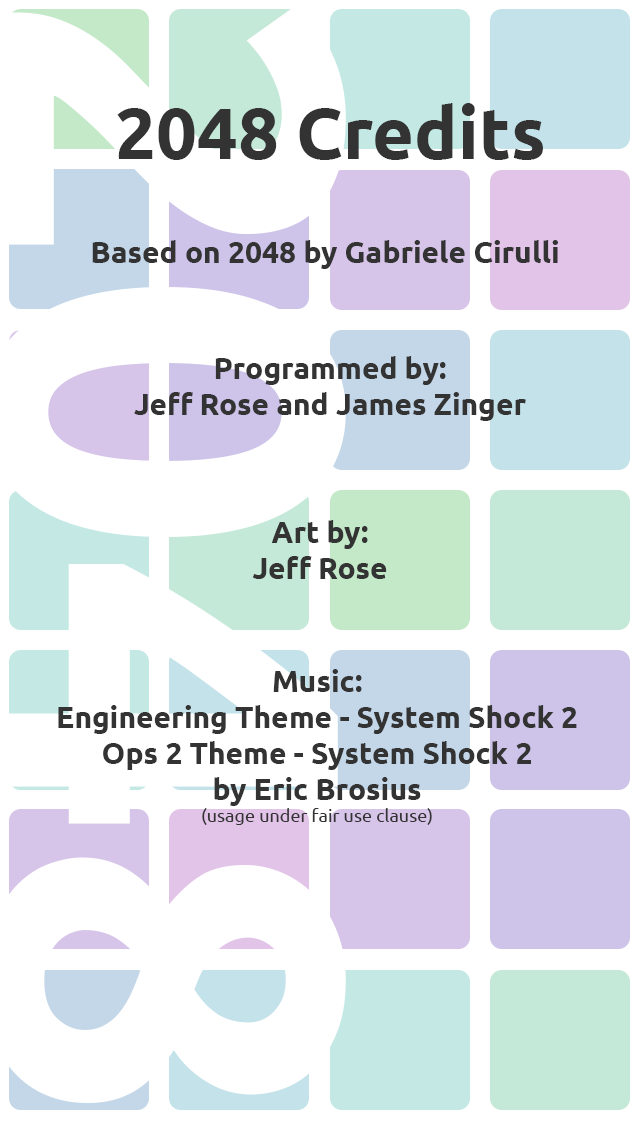
<style>
.page{position:relative;width:640px;height:1136px;background:#ffffff}
.page>*{position:absolute;margin:0}
.t1{font:72px "Ubuntu-Bold";color:#333333}
.t2{font:30px "Ubuntu-Bold";color:#333333}
.t3{font:18px "Ubuntu";color:#333333}
</style>
<div class="page">
<p class="t1" style="left:117px;top:103px;width:426px;height:57px">2048 Credits</p>
<p class="t2" style="left:92px;top:240px;width:466px;height:29px">Based on 2048 by Gabriele Cirulli</p>
<p class="t2" style="left:134px;top:356px;width:392px;height:65px;text-align:center">Programmed by:<br>Jeff Rose and James Zinger</p>
<p class="t2" style="left:252px;top:520px;width:135px;height:59px;text-align:center">Art by:<br>Jeff Rose</p>
<p class="t2" style="left:58px;top:669px;width:519px;height:156px;text-align:center">Music:<br>Engineering Theme - System Shock 2<br>Ops 2 Theme - System Shock 2<br>by Eric Brosius<br><span class="t3">(usage under fair use clause)</span></p>
</div>
